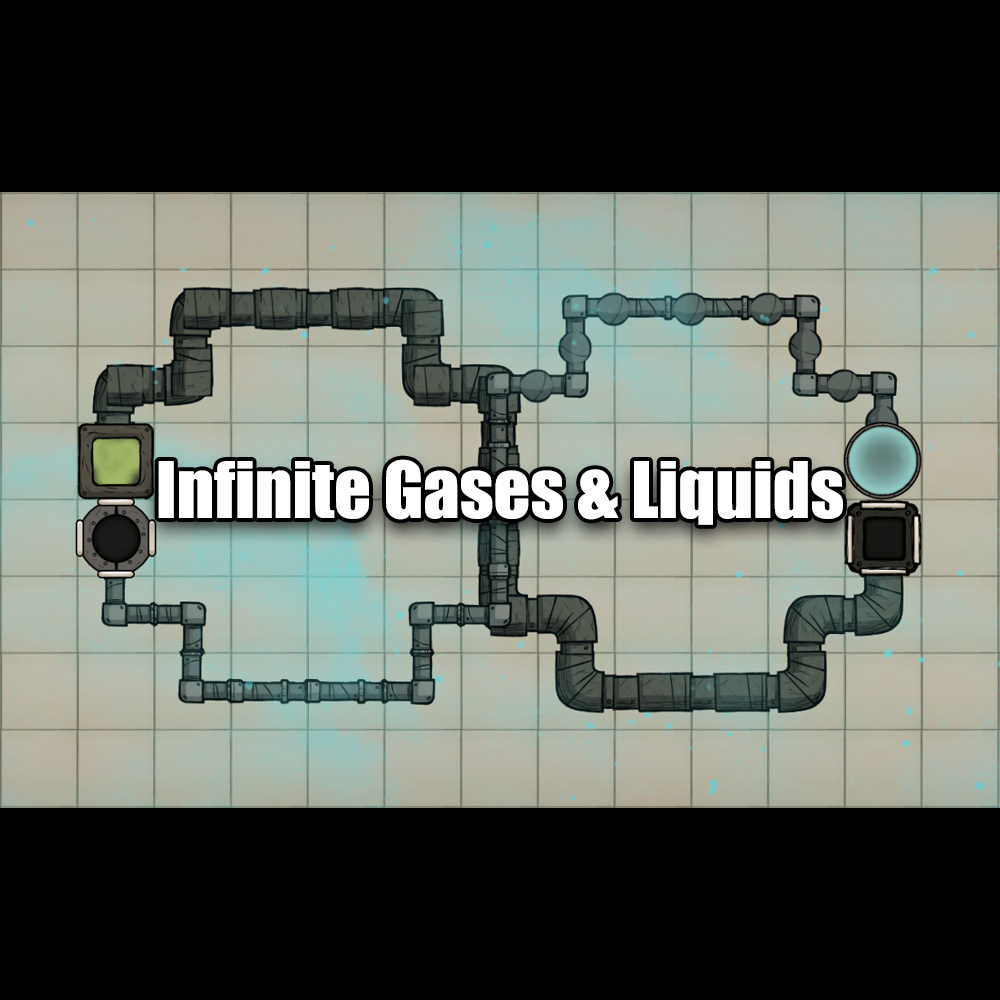
<style>
.page{position:relative;width:1000px;height:1000px;background:#000000}
.page>*{position:absolute;margin:0}
.t1{font:72px "Impact";color:#ffffff}
</style>
<div class="page">
<p class="t1" style="left:158px;top:459px;width:685px;height:66px">Infinite Gases &amp; Liquids</p>
</div>
